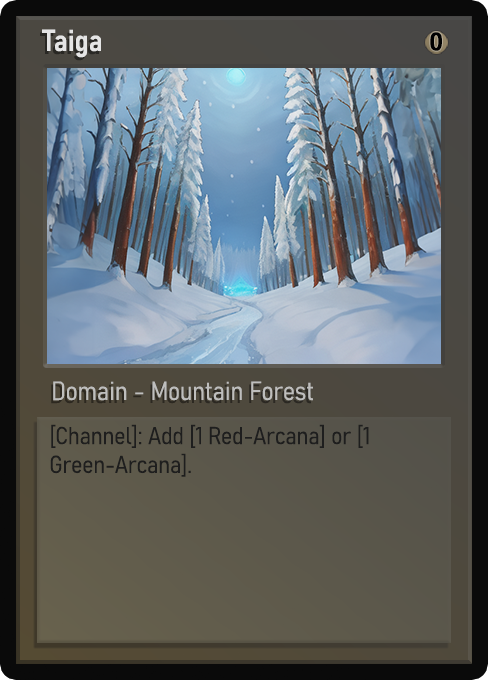
<style>
.page{position:relative;width:488px;height:680px}
.page>*{position:absolute;margin:0}
.t1{font:30px "Bahnschrift-SemiBoldSemiCondensed";color:#f2f2f2;font-weight:bold}
.t2{font:25px "WTRRoycroft";color:#000000;font-weight:bold;scale:1.09 1}
.t3{font:26px "Bahnschrift-LightSemiCondensed";color:#c8c8c8;font-weight:bold}
.t4{font:24px "Bahnschrift-LightSemiCondensed";color:#1e1e1e;font-weight:bold}
</style>
<div class="page">
<p class="t1" style="left:42px;top:29px;width:59px;height:29px;opacity:0.9">Taiga</p>
<p class="t2" style="left:430px;top:32px;width:12px;height:19px">0</p>
<p class="t3" style="left:53px;top:381px;width:260px;height:20px;opacity:0.9">Domain - Mountain Forest</p>
<p class="t4" style="left:50px;top:424px;width:319px;height:53px">[Channel]: Add [1 Red-Arcana] or [1 Green-Arcana].</p>
</div>
